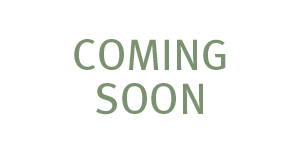
<style>
.page{position:relative;width:300px;height:155px;background:#ffffff}
.page>*{position:absolute;margin:0}
.t1{font:43.9px/43.8px "MetaBook-Roman";color:#7a926f;text-transform:uppercase}
</style>
<div class="page">
<p class="t1" style="left:74px;top:39px;width:152px;height:76px;text-align:center">Coming<br>Soon</p>
</div>
